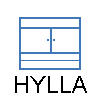
<style>
.page{position:relative;width:100px;height:100px;background:#ffffff}
.page>*{position:absolute;margin:0}
.t1{font:24px "ArialMT";color:#000000}
</style>
<div class="page">
<p class="t1" style="left:15px;top:76px;width:72px;height:17px">HYLLA</p>
</div>
